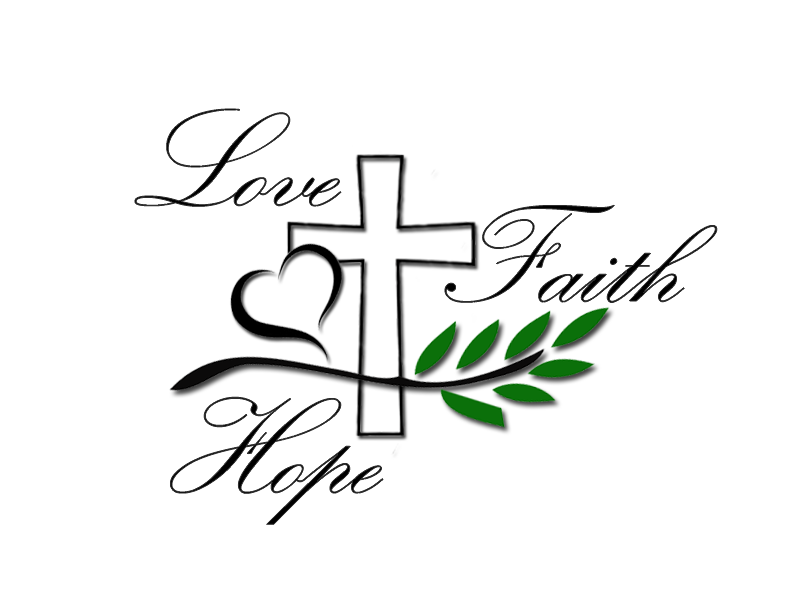
<style>
.page{position:relative;width:792px;height:612px;background:#ffffff}
.page>*{position:absolute;margin:0}
.t1{font:140px "KunstlerScript";color:#000000}
</style>
<div class="page">
<p class="t1" style="left:135px;top:109px;width:206px;height:98px">Love</p>
<p class="t1" style="left:445px;top:205px;width:272px;height:98px">Faith</p>
<p class="t1" style="left:170px;top:397px;width:213px;height:128px">Hope</p>
</div>
